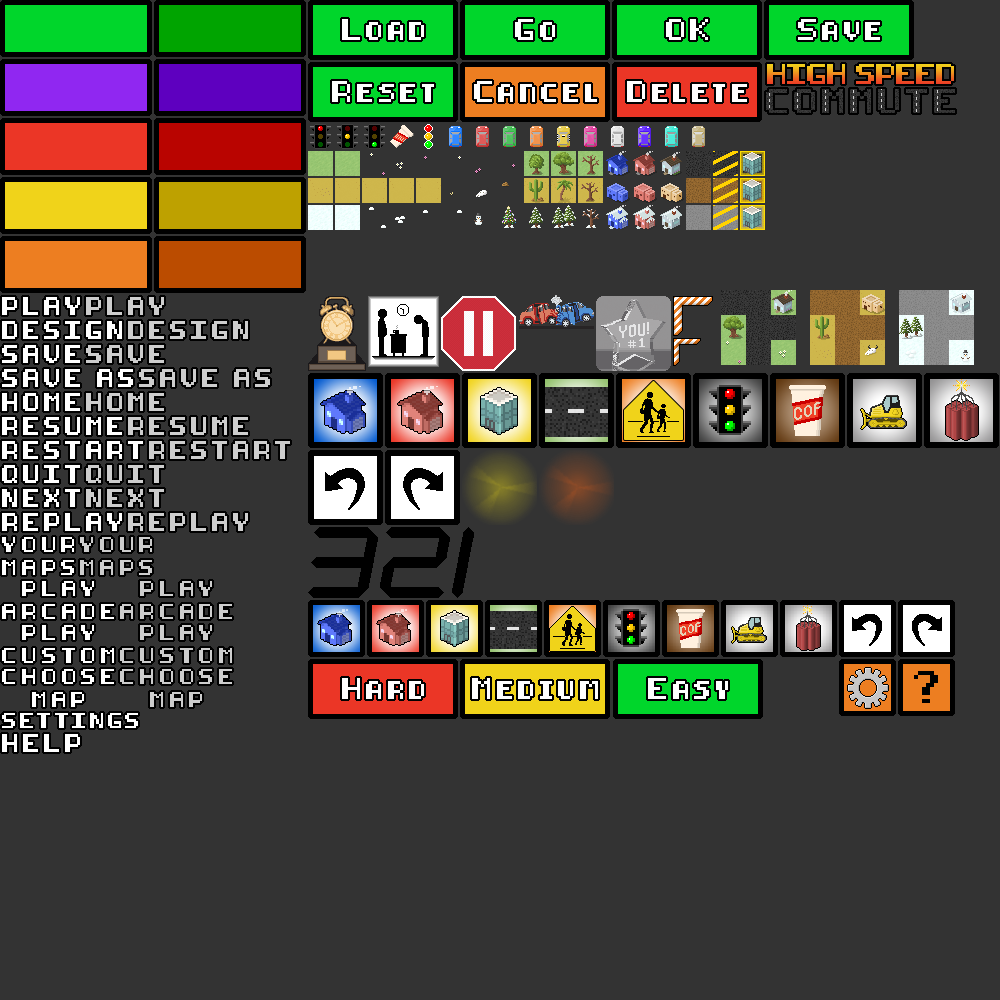
<style>
.page{position:relative;width:1000px;height:1000px;background:#333333}
.page>*{position:absolute;margin:0}
.t1{font:18px "8-bit-pusab";letter-spacing:0.2em;color:#ffffff}
.t2{font:15px "8-bit-pusab";letter-spacing:0.2em;color:#ffffff}
.t3{font:15px "8-bit-pusab";letter-spacing:0.2em;color:#cdcdcd}
.t4{font:13px/23px "8-bit-pusab";letter-spacing:0.38em;color:#ffffff}
.t5{font:13px/23px "8-bit-pusab";letter-spacing:0.38em;color:#cdcdcd}
.t6{font:13px "8-bit-pusab";letter-spacing:0.2em;color:#ffffff}
</style>
<div class="page">
<p class="t1" style="left:342px;top:19px;width:82px;height:21px">Load</p>
<p class="t1" style="left:515px;top:19px;width:40px;height:21px">Go</p>
<p class="t1" style="left:666px;top:19px;width:42px;height:21px">OK</p>
<p class="t1" style="left:798px;top:19px;width:82px;height:21px">Save</p>
<p class="t1" style="left:332px;top:81px;width:102px;height:21px">Reset</p>
<p class="t1" style="left:474px;top:81px;width:123px;height:21px">Cancel</p>
<p class="t1" style="left:627px;top:81px;width:120px;height:21px">Delete</p>
<p class="t2" style="left:2px;top:297px;width:78px;height:18px">PLAY</p>
<p class="t3" style="left:86px;top:297px;width:78px;height:18px">PLAY</p>
<p class="t2" style="left:2px;top:321px;width:120px;height:18px">DESIGN</p>
<p class="t3" style="left:128px;top:321px;width:120px;height:18px">DESIGN</p>
<p class="t2" style="left:2px;top:345px;width:78px;height:18px">SAVE</p>
<p class="t3" style="left:86px;top:345px;width:78px;height:18px">SAVE</p>
<p class="t2" style="left:2px;top:369px;width:131px;height:18px">SAVE AS</p>
<p class="t3" style="left:139px;top:369px;width:131px;height:18px">SAVE AS</p>
<p class="t2" style="left:2px;top:393px;width:78px;height:18px">HOME</p>
<p class="t3" style="left:86px;top:393px;width:78px;height:18px">HOME</p>
<p class="t2" style="left:2px;top:417px;width:120px;height:18px">RESUME</p>
<p class="t3" style="left:128px;top:417px;width:120px;height:18px">RESUME</p>
<p class="t2" style="left:2px;top:441px;width:141px;height:18px">RESTART</p>
<p class="t3" style="left:149px;top:441px;width:141px;height:18px">RESTART</p>
<p class="t2" style="left:2px;top:465px;width:78px;height:18px">QUIT</p>
<p class="t3" style="left:86px;top:465px;width:78px;height:18px">QUIT</p>
<p class="t2" style="left:2px;top:489px;width:78px;height:18px">NEXT</p>
<p class="t3" style="left:86px;top:489px;width:78px;height:18px">NEXT</p>
<p class="t2" style="left:2px;top:513px;width:120px;height:18px">REPLAY</p>
<p class="t3" style="left:128px;top:513px;width:120px;height:18px">REPLAY</p>
<p class="t4" style="left:2px;top:537px;width:72px;height:38px;text-align:center">YOUR<br>MAPS</p>
<p class="t5" style="left:80px;top:537px;width:72px;height:38px;text-align:center">YOUR<br>MAPS</p>
<p class="t4" style="left:2px;top:581px;width:112px;height:38px;text-align:center">PLAY<br>ARCADE</p>
<p class="t5" style="left:120px;top:581px;width:112px;height:38px;text-align:center">PLAY<br>ARCADE</p>
<p class="t4" style="left:2px;top:625px;width:112px;height:38px;text-align:center">PLAY<br>CUSTOM</p>
<p class="t5" style="left:120px;top:625px;width:112px;height:38px;text-align:center">PLAY<br>CUSTOM</p>
<p class="t4" style="left:2px;top:669px;width:112px;height:38px;text-align:center">CHOOSE<br>MAP</p>
<p class="t5" style="left:120px;top:669px;width:112px;height:38px;text-align:center">CHOOSE<br>MAP</p>
<p class="t1" style="left:342px;top:678px;width:82px;height:21px">Hard</p>
<p class="t1" style="left:472px;top:678px;width:126px;height:21px">Medium</p>
<p class="t1" style="left:648px;top:678px;width:80px;height:21px">Easy</p>
<p class="t6" style="left:2px;top:713px;width:136px;height:15px">SETTINGS</p>
<p class="t2" style="left:2px;top:734px;width:78px;height:18px">HELP</p>
</div>
